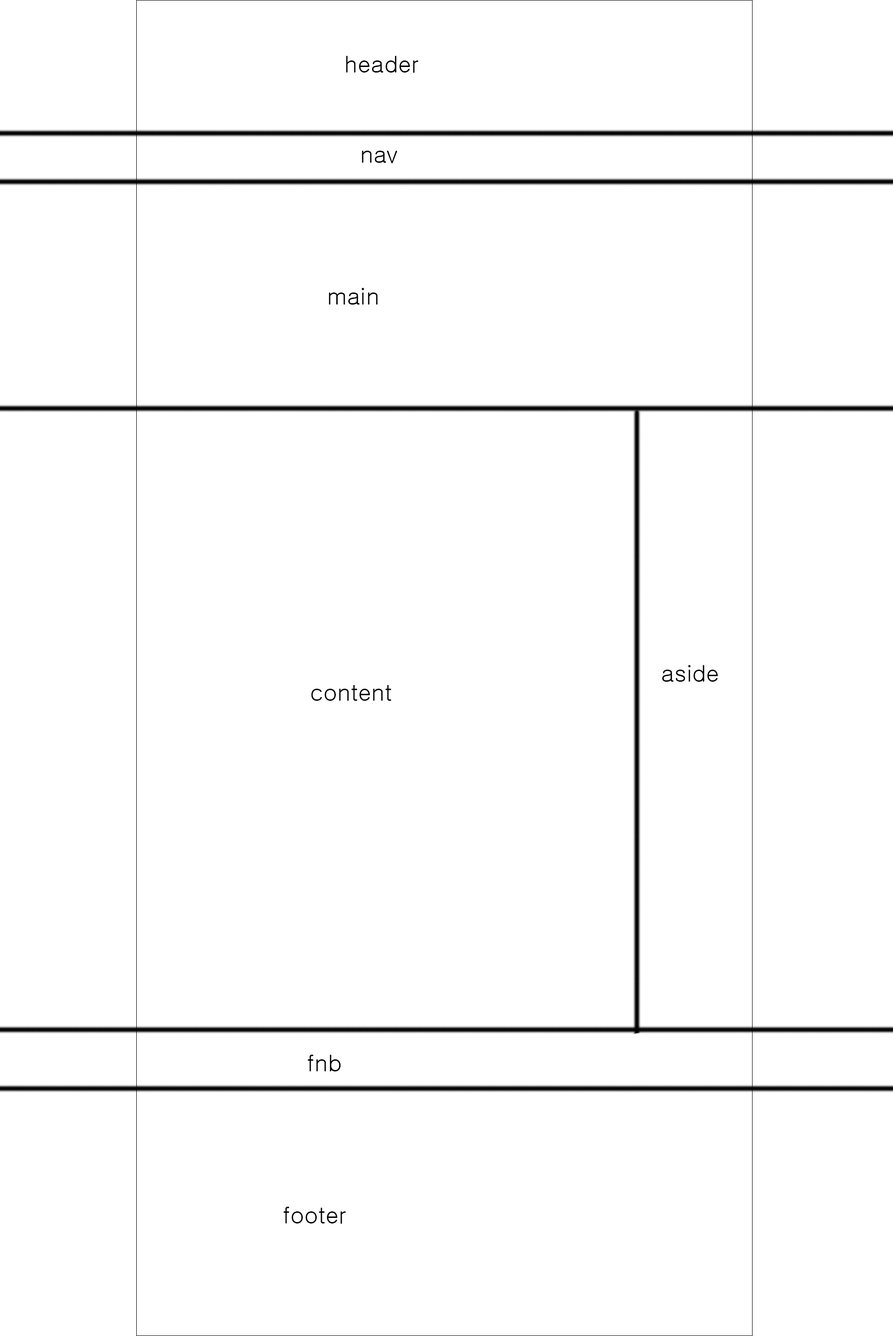
<style>
.page{position:relative;width:893px;height:1336px;background:#ffffff}
.page>*{position:absolute;margin:0}
.t1{font:23.2px "Gulim";color:#000000}
</style>
<div class="page">
<p class="t1" style="left:346px;top:56px;width:72px;height:17px">header</p>
<p class="t1" style="left:362px;top:151px;width:35px;height:12px">nav</p>
<p class="t1" style="left:329px;top:288px;width:49px;height:17px">main</p>
<p class="t1" style="left:662px;top:665px;width:56px;height:17px">aside</p>
<p class="t1" style="left:311px;top:685px;width:80px;height:16px">content</p>
<p class="t1" style="left:307px;top:1054px;width:34px;height:17px">fnb</p>
<p class="t1" style="left:283px;top:1207px;width:63px;height:17px">footer</p>
</div>
